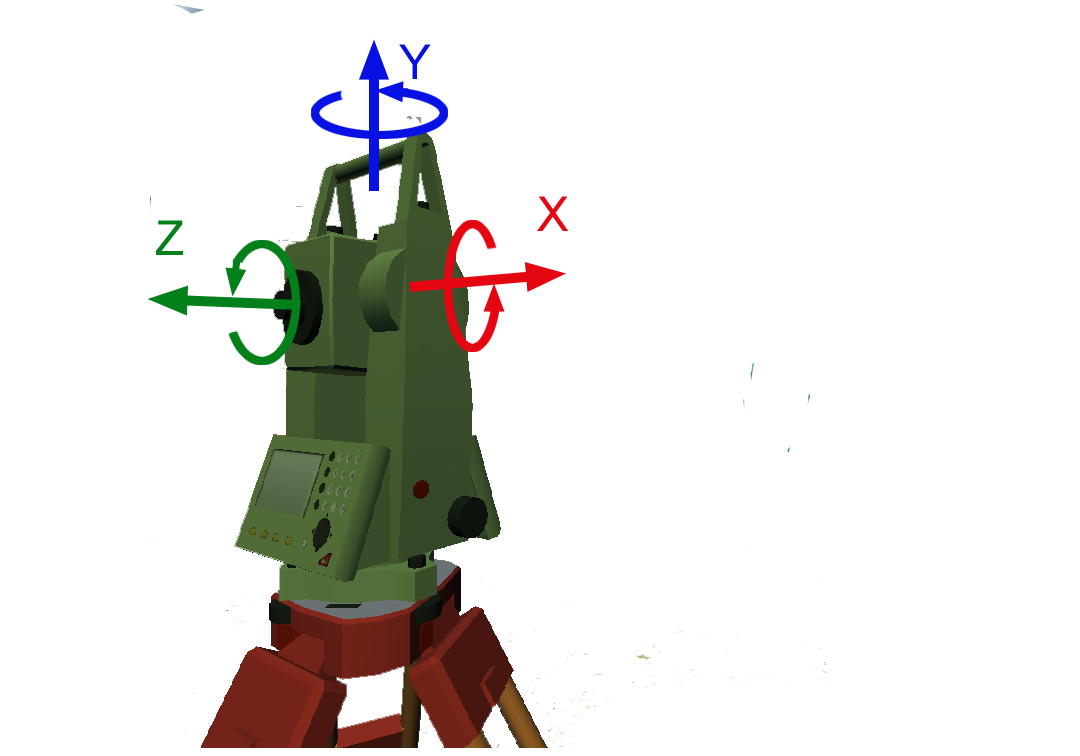
<style>
.page{position:relative;width:1080px;height:756px;background:#ffffff}
.page>*{position:absolute;margin:0}
.t1{font:48px "ArialMT";color:#0711e4}
.t2{font:48px "ArialMT";color:#e40712}
.t3{font:48px "ArialMT";color:#04801b}
</style>
<div class="page">
<p class="t1" style="left:399px;top:44px;width:32px;height:35px">Y</p>
<p class="t2" style="left:537px;top:196px;width:31px;height:35px">X</p>
<p class="t3" style="left:156px;top:220px;width:27px;height:35px">Z</p>
</div>
